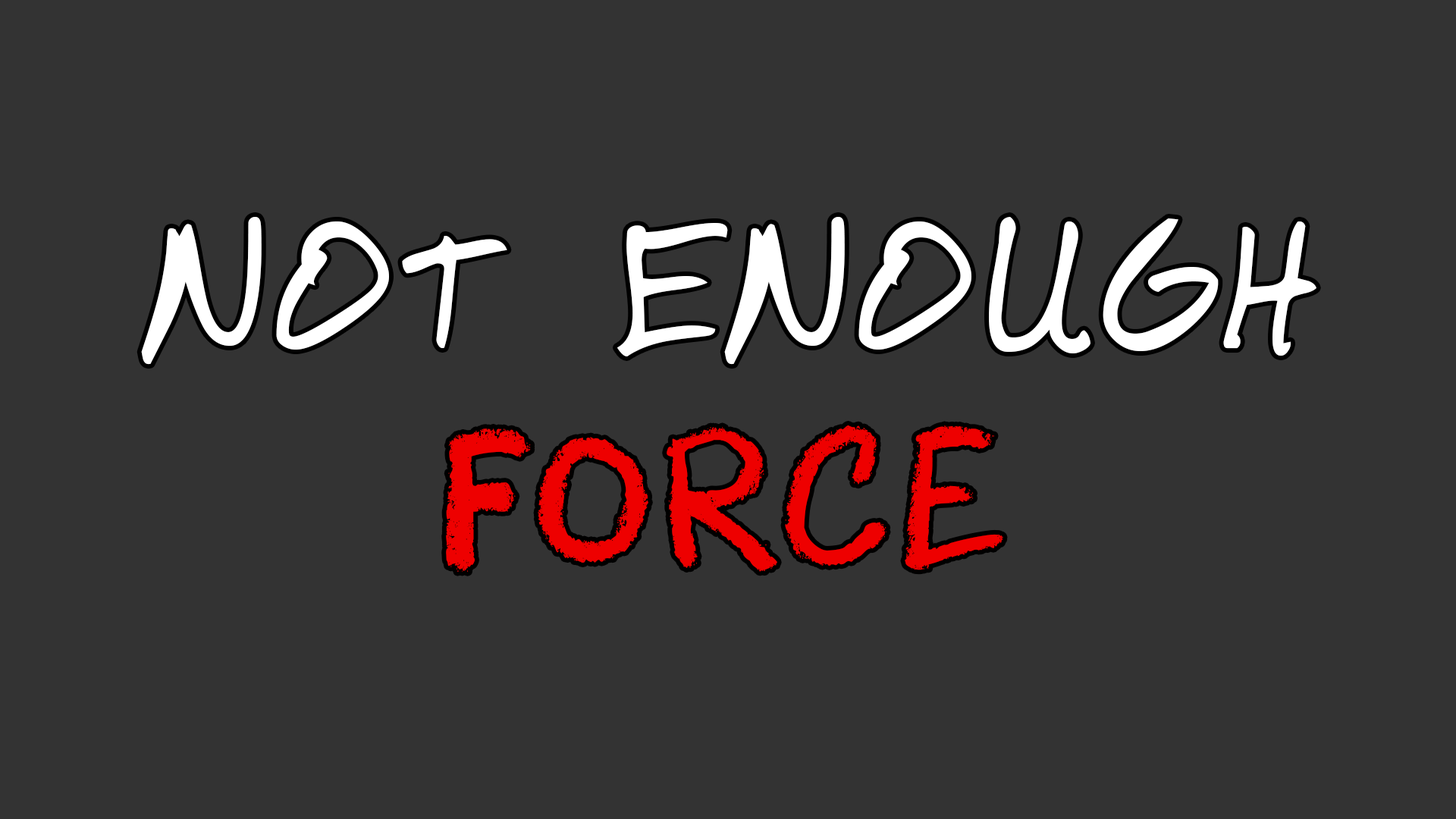
<style>
.page{position:relative;width:1456px;height:819px;background:#333333}
.page>*{position:absolute;margin:0}
.t1{font:183.5px "DomesticManners";letter-spacing:0.04em;color:#ffffff}
.t2{font:183.5px "DKCoolCrayon";letter-spacing:0.04em;color:#ee0000}
</style>
<div class="page">
<p class="t1" style="left:141px;top:217px;width:1175px;height:355px;text-align:center">NOT ENOUGH<br><span class="t2">FORCE</span></p>
</div>
